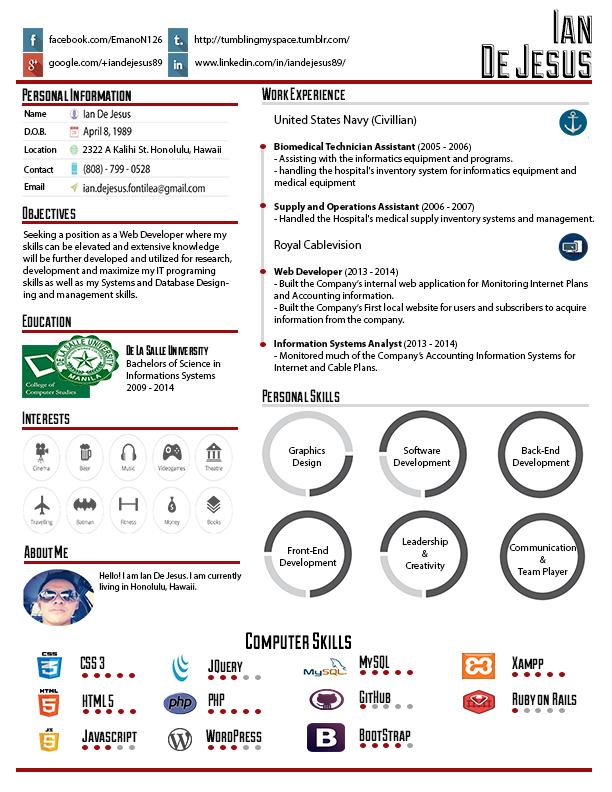
<style>
.page{position:relative;width:612px;height:792px;background:#ffffff}
.page>*{position:absolute;margin:0}
.t1{font:48px "Duke-Regular";color:#020202}
.t2{font:10px "MyriadPro-Regular";color:#090909}
.t3{font:18px "Duke-Fill";color:#090909}
.t4{font:12px "MyriadPro-Regular";color:#090909}
.t5{font:10px "MyriadPro-Bold";color:#090909}
.t6{font:14px "Duke-Fill";color:#090909}
.t7{font:9px "MyriadPro-Regular";color:#090909}
.t8{font:24px "Duke-Fill";color:#000000}
</style>
<div class="page">
<p class="t1" style="left:553px;top:9px;width:39px;height:35px">Ian</p>
<p class="t2" style="left:49px;top:35px;width:114px;height:9px">facebook.com/EmanoN126</p>
<p class="t2" style="left:194px;top:35px;width:156px;height:11px">http://tumblingmyspace.tumblr.com/</p>
<p class="t1" style="left:481px;top:44px;width:111px;height:34px">De Jesus</p>
<p class="t2" style="left:49px;top:58px;width:114px;height:10px">google.com/+iandejesus89</p>
<p class="t2" style="left:195px;top:58px;width:151px;height:10px">www.linkedin.com/in/iandejesus89/</p>
<p class="t3" style="left:262px;top:87px;width:83px;height:13px">Work Experience</p>
<p class="t2" style="left:274px;top:115px;width:320px;height:256px"><span class="t4">United States Navy (Civillian) <br><br></span><span class="t5">Biomedical Technician Assistant </span>(2005 - 2006)<br>- Assisting with the informatics equipment and programs. <br>- handling the hospital's inventory system for informatics equipment and medical equipment<br><br><span class="t5">Supply and Operations Assistant </span>(2006 - 2007)<br>- Handled the Hospital's medical supply inventory systems and management.<br><br><span class="t4">Royal Cablevision <br><br></span><span class="t5">Web Developer </span>(2013 - 2014)<br>- Built the Company’s internal web application for Monitoring Internet Plans and Accounting information.<br>- Built the Company’s First local website for users and subscribers to acquire information from the company.<br><br><span class="t5">Information Systems Analyst </span>(2013 - 2014)<br>- Monitored much of the Company’s Accounting Information Systems for Internet and Cable Plans.</p>
<p class="t2" style="left:82px;top:145px;width:139px;height:9px">2322 A Kalihi St. Honolulu, Hawaii</p>
<p class="t3" style="left:22px;top:206px;width:54px;height:13px">Objectives</p>
<p class="t2" style="left:23px;top:230px;width:209px;height:70px">Seeking a position as a Web Developer where my skills can be elevated and extensive knowledge will be further developed and utilized for research, development and maximize my IT programing skills as well as my Systems and Database Designing and management skills.</p>
<p class="t3" style="left:22px;top:314px;width:49px;height:13px">Education</p>
<p class="t2" style="left:126px;top:345px;width:95px;height:46px"><span class="t6">De La Salle University<br></span>Bachelors of Science in Informations Systems<br>2009 - 2014</p>
<p class="t3" style="left:262px;top:389px;width:78px;height:13px">Personal Skills</p>
<p class="t3" style="left:22px;top:411px;width:48px;height:13px">Interests</p>
<p class="t2" style="left:289px;top:446px;width:36px;height:22px;text-align:center">Graphics<br>Design</p>
<p class="t2" style="left:394px;top:446px;width:57px;height:22px;text-align:center">Software<br>Development</p>
<p class="t2" style="left:513px;top:446px;width:57px;height:22px;text-align:center">Back-End<br>Development</p>
<p class="t3" style="left:24px;top:545px;width:44px;height:13px">About Me</p>
<p class="t2" style="left:402px;top:537px;width:46px;height:35px;text-align:center">Leadership<br>&amp;<br>Creativity</p>
<p class="t2" style="left:509px;top:544px;width:67px;height:34px;text-align:center">Communication<br>&amp;<br>Team Player</p>
<p class="t2" style="left:280px;top:546px;width:57px;height:22px;text-align:center">Front-End<br>Development</p>
<p class="t7" style="left:99px;top:572px;width:143px;height:20px">Hello! I am Ian De Jesus. I am currently<br>living in Honolulu, Hawaii.</p>
<p class="t8" style="left:246px;top:632px;width:105px;height:17px">Computer Skills</p>
<p class="t3" style="left:80px;top:656px;width:25px;height:13px">CSS 3</p>
<p class="t3" style="left:208px;top:659px;width:35px;height:15px">JQuery</p>
<p class="t3" style="left:359px;top:655px;width:31px;height:15px">MySQL</p>
<p class="t3" style="left:512px;top:656px;width:32px;height:13px">Xampp</p>
<p class="t3" style="left:82px;top:694px;width:32px;height:13px">HTML 5</p>
<p class="t3" style="left:208px;top:693px;width:17px;height:13px">PHP</p>
<p class="t3" style="left:359px;top:690px;width:32px;height:13px">GitHub</p>
<p class="t3" style="left:512px;top:692px;width:65px;height:13px">Ruby on Rails</p>
<p class="t3" style="left:82px;top:729px;width:55px;height:13px">Javascript</p>
<p class="t3" style="left:206px;top:729px;width:56px;height:13px">WordPress</p>
<p class="t3" style="left:359px;top:728px;width:52px;height:13px">BootStrap</p>
</div>
